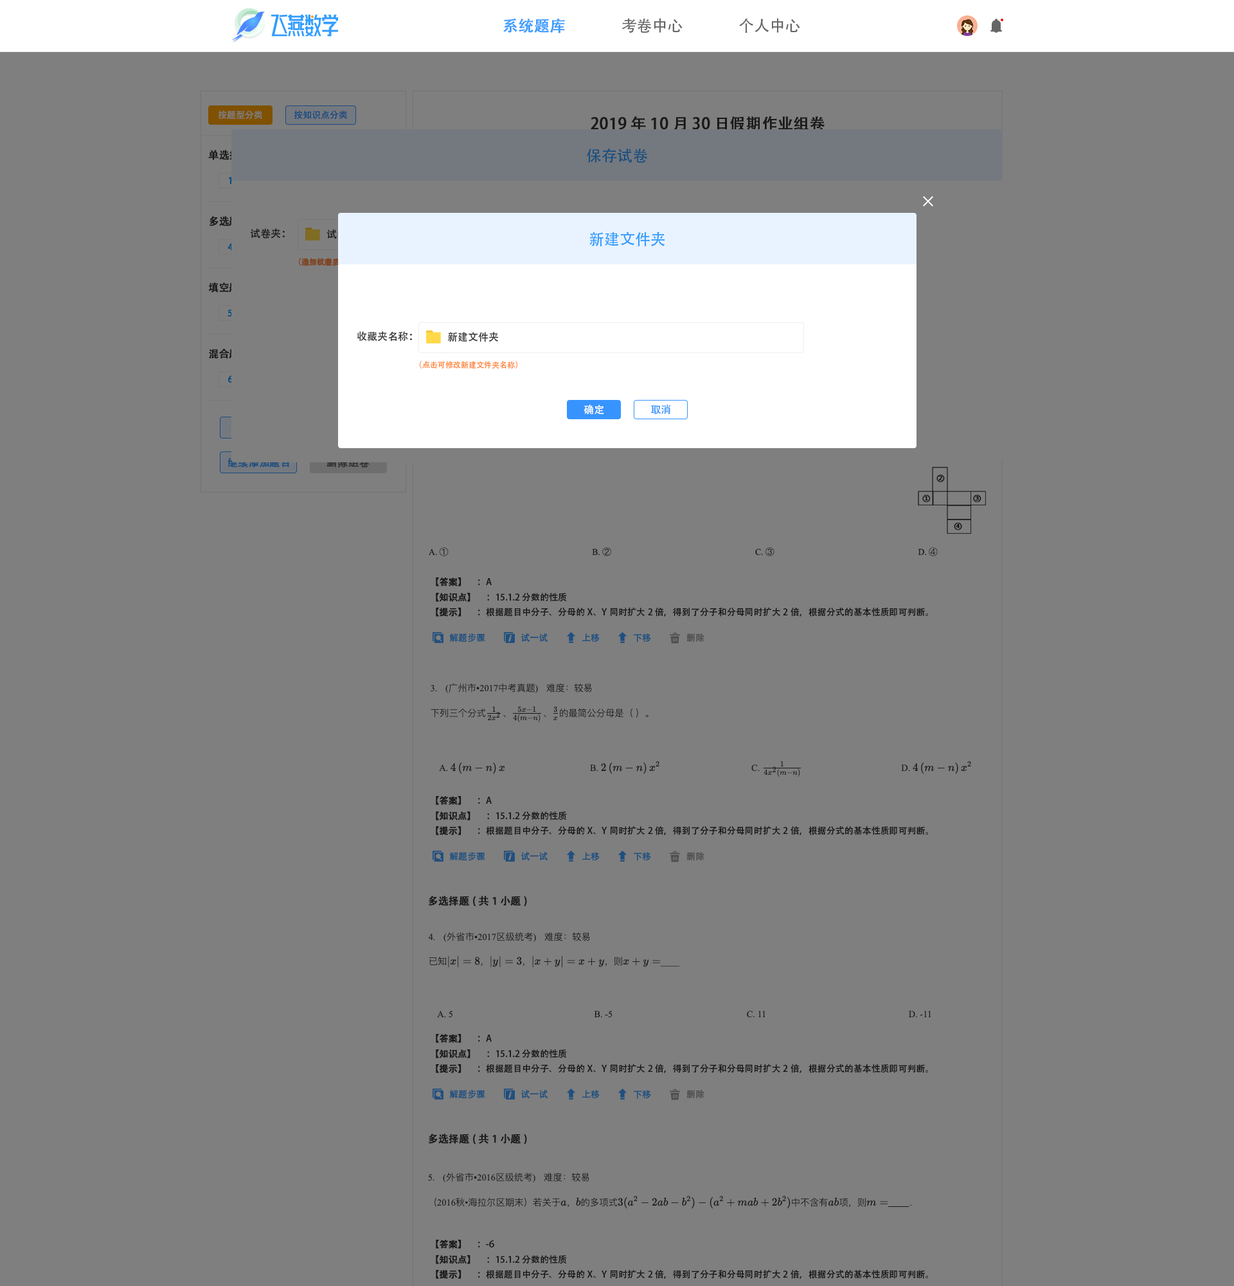
<style>
.page{position:relative;width:1234px;height:1286px;background:#7f7f7f}
.page>*{position:absolute;margin:0}
.t1{font:15.4px "AdobeHeitiStd-Regular";color:#409eff;font-weight:bold}
.t2{font:15.4px "AdobeHeitiStd-Regular";color:#666666}
.t3{font:9px "AdobeHeitiStd-Regular";color:#7f7f7f}
.t4{font:9px "AdobeHeitiStd-Regular";color:#1b4a7f}
.t5{font:15.4px "AdobeHeitiStd-Regular";color:#191919;font-weight:bold}
.t6{font:10.3px "AdobeHeitiStd-Regular";color:#74797f;font-weight:bold}
.t7{font:15.4px "AdobeHeitiStd-Regular";color:#194e7f}
.t8{font:9px "AdobeHeitiStd-Regular";color:#024f7f;font-weight:bold}
.t9{font:10.3px "AdobeHeitiStd-Regular";font-weight:bold}
.t10{font:10.3px "AdobeHeitiStd-Regular";color:#191919}
.t11{font:15.4px "AdobeHeitiStd-Regular";color:#339dff}
.t12{font:9px "AdobeHeitiStd-Regular";font-weight:bold}
.t13{font:10.3px "AdobeHeitiStd-Regular";color:#7f7f7f;font-weight:bold}
.t14{font:10.3px "AdobeHeitiStd-Regular";color:#333333}
.t15{font:7.7px "AdobeHeitiStd-Regular";color:#ff8941}
.t16{font:10.3px "AdobeHeitiStd-Regular";color:#ffffff}
.t17{font:10.3px "AdobeHeitiStd-Regular";color:#3794ff}
.t18{font:9px "AdobeHeitiStd-Regular";color:#2e2e2e;font-weight:bold}
.t19{font:9px "AdobeHeitiStd-Regular";color:#2e2e2e}
.t20{font:9px "AdobeHeitiStd-Regular";color:#194e7f}
.t21{font:9px "AdobeHeitiStd-Regular";color:#4c4c4c}
.t22{font:10.3px "AdobeHeitiStd-Regular";color:#191919;font-weight:bold}
</style>
<div class="page">
<p class="t1" style="left:503px;top:19px;width:62px;height:14px">系统题库</p>
<p class="t2" style="left:622px;top:18px;width:61px;height:15px">考卷中心</p>
<p class="t2" style="left:739px;top:18px;width:61px;height:15px">个人中心</p>
<p class="t3" style="left:218px;top:110px;width:44px;height:10px">按题型分类</p>
<p class="t4" style="left:294px;top:110px;width:53px;height:10px">按知识点分类</p>
<p class="t5" style="left:591px;top:116px;width:234px;height:15px">2019年10月30日假期作业组卷</p>
<p class="t6" style="left:208px;top:150px;width:100px;height:11px">单选择题(共3小题)</p>
<p class="t7" style="left:586px;top:148px;width:62px;height:15px">保存试卷</p>
<p class="t8" style="left:228px;top:177px;width:4px;height:7px">1</p>
<p class="t9" style="left:209px;top:216px;width:89px;height:11px">多选题(共1小题)</p>
<p class="t10" style="left:250px;top:228px;width:35px;height:11px">试卷夹：</p>
<p class="t11" style="left:590px;top:231px;width:75px;height:15px">新建文件夹</p>
<p class="t12" style="left:228px;top:243px;width:5px;height:8px">4</p>
<p class="t13" style="left:208px;top:282px;width:90px;height:11px">填空题(共1小题)</p>
<p class="t8" style="left:228px;top:309px;width:5px;height:8px">5</p>
<p class="t14" style="left:357px;top:331px;width:55px;height:10px">收藏夹名称：</p>
<p class="t14" style="left:447px;top:332px;width:51px;height:10px">新建文件夹</p>
<p class="t13" style="left:209px;top:348px;width:89px;height:11px">混合题(共1小题)</p>
<p class="t15" style="left:420px;top:361px;width:98px;height:8px">（点击可修改新建文件夹名称）</p>
<p class="t12" style="left:228px;top:375px;width:5px;height:8px">6</p>
<p class="t16" style="left:584px;top:404px;width:20px;height:11px">确定</p>
<p class="t17" style="left:651px;top:404px;width:20px;height:11px">取消</p>
<p class="t9" style="left:228px;top:457px;width:61px;height:10px">继续添加题目</p>
<p class="t9" style="left:327px;top:457px;width:43px;height:10px">删除组卷</p>
<p class="t18" style="left:436px;top:577px;width:56px;height:9px">【答案】 <span class="t19">     ：A</span></p>
<p class="t19" style="left:436px;top:593px;width:131px;height:9px"><span class="t18">【知识点】 </span>     ：15.1.2 分数的性质</p>
<p class="t19" style="left:436px;top:607px;width:492px;height:9px"><span class="t18">【提示】 </span>     ：根据题目中分子、分母的X、Y同时扩大2倍，得到了分子和分母同时扩大2倍，根据分式的基本性质即可判断。</p>
<p class="t20" style="left:449px;top:633px;width:36px;height:9px">解题步骤</p>
<p class="t20" style="left:521px;top:633px;width:27px;height:9px">试一试</p>
<p class="t20" style="left:582px;top:633px;width:18px;height:9px">上移</p>
<p class="t20" style="left:634px;top:633px;width:17px;height:9px">下移</p>
<p class="t21" style="left:687px;top:633px;width:18px;height:9px">删除</p>
<p class="t18" style="left:436px;top:796px;width:56px;height:9px">【答案】 <span class="t19">     ：A</span></p>
<p class="t19" style="left:436px;top:811px;width:131px;height:9px"><span class="t18">【知识点】 </span>     ：15.1.2 分数的性质</p>
<p class="t19" style="left:436px;top:825px;width:492px;height:10px"><span class="t18">【提示】 </span>     ：根据题目中分子、分母的X、Y同时扩大2倍，得到了分子和分母同时扩大2倍，根据分式的基本性质即可判断。</p>
<p class="t20" style="left:449px;top:852px;width:36px;height:9px">解题步骤</p>
<p class="t20" style="left:521px;top:852px;width:27px;height:8px">试一试</p>
<p class="t20" style="left:582px;top:852px;width:18px;height:9px">上移</p>
<p class="t20" style="left:634px;top:852px;width:17px;height:9px">下移</p>
<p class="t21" style="left:687px;top:852px;width:18px;height:8px">删除</p>
<p class="t22" style="left:428px;top:896px;width:99px;height:10px">多选择题(共1小题)</p>
<p class="t18" style="left:436px;top:1034px;width:56px;height:9px">【答案】 <span class="t19">     ：A</span></p>
<p class="t19" style="left:436px;top:1049px;width:131px;height:9px"><span class="t18">【知识点】 </span>     ：15.1.2 分数的性质</p>
<p class="t19" style="left:436px;top:1063px;width:492px;height:10px"><span class="t18">【提示】 </span>     ：根据题目中分子、分母的X、Y同时扩大2倍，得到了分子和分母同时扩大2倍，根据分式的基本性质即可判断。</p>
<p class="t20" style="left:449px;top:1090px;width:36px;height:9px">解题步骤</p>
<p class="t20" style="left:521px;top:1090px;width:27px;height:8px">试一试</p>
<p class="t20" style="left:582px;top:1090px;width:18px;height:9px">上移</p>
<p class="t20" style="left:634px;top:1090px;width:17px;height:9px">下移</p>
<p class="t21" style="left:687px;top:1090px;width:18px;height:8px">删除</p>
<p class="t22" style="left:428px;top:1133px;width:99px;height:11px">多选择题(共1小题)</p>
<p class="t18" style="left:436px;top:1239px;width:58px;height:9px">【答案】 <span class="t19">     ：-6</span></p>
<p class="t19" style="left:436px;top:1255px;width:131px;height:9px"><span class="t18">【知识点】 </span>     ：15.1.2 分数的性质</p>
<p class="t19" style="left:436px;top:1269px;width:492px;height:10px"><span class="t18">【提示】 </span>     ：根据题目中分子、分母的X、Y同时扩大2倍，得到了分子和分母同时扩大2倍，根据分式的基本性质即可判断。</p>
</div>
